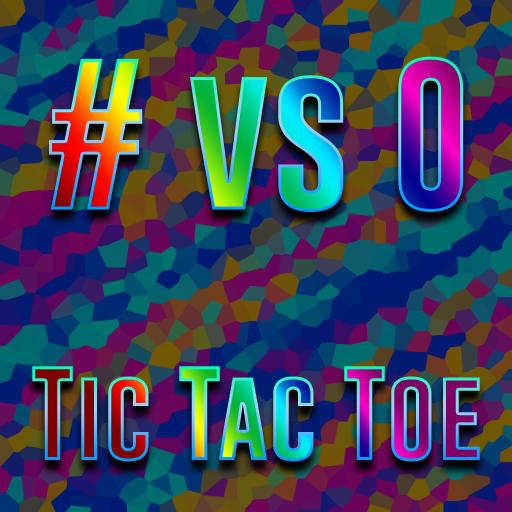
<style>
.page{position:relative;width:512px;height:512px}
.page>*{position:absolute;margin:0}
.t1{font:154.2px "GoboldBold";color:#000000}
.t2{font:95.8px "GoboldBold";color:#000000}
</style>
<div class="page">
<p class="t1" style="left:49px;top:56px;width:415px;height:156px"># vs O</p>
<p class="t2" style="left:32px;top:366px;width:448px;height:96px">Tic Tac Toe</p>
</div>
